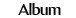
<style>
.page{position:relative;width:76px;height:18px;background:#ffffff}
.page>*{position:absolute;margin:0}
.t1{font:12px "AmiraParadiso";letter-spacing:-0.06em;color:#000000}
</style>
<div class="page">
<p class="t1" style="left:18px;top:3px;width:43px;height:12px;opacity:0.96">Album</p>
</div>
